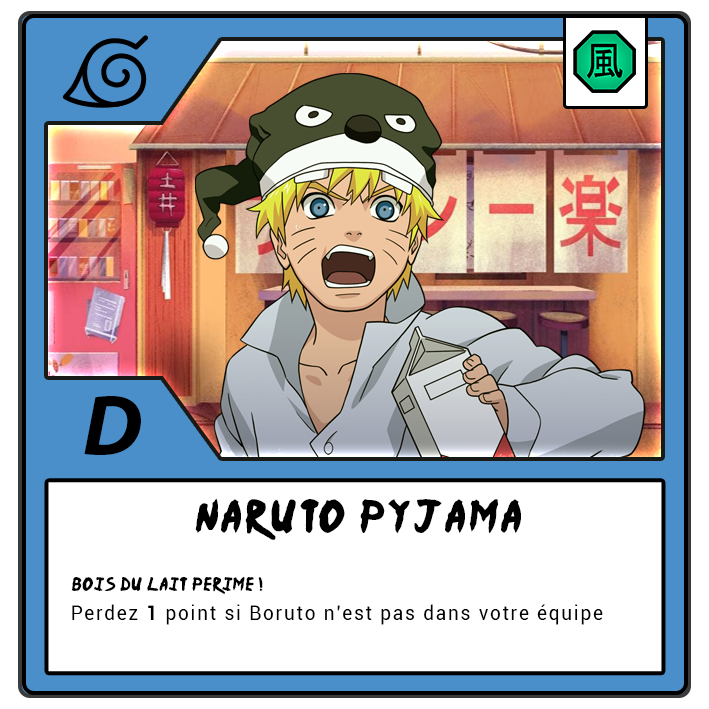
<style>
.page{position:relative;width:709px;height:709px;background:#ffffff}
.page>*{position:absolute;margin:0}
.t1{font:87.5px "MyriadPro-BoldIt";letter-spacing:-0.12em;color:#000000}
.t2{font:37.5px "Ninja-Naruto";letter-spacing:0.1em;color:#000000}
.t3{font:15.4px "Ninja-Naruto";letter-spacing:0.07em;color:#000000}
.t4{font:20.8px "Roboto-Regular";letter-spacing:0.1em;color:#000000;scale:0.9 1}
.t5{font:20.8px "Roboto-Bold";letter-spacing:0.1em;color:#000000;scale:0.9 1}
</style>
<div class="page">
<p class="t1" style="left:84px;top:396px;width:57px;height:59px">D</p>
<p class="t2" style="left:195px;top:498px;width:326px;height:42px">NARUTO Pyjama</p>
<p class="t3" style="left:71px;top:577px;width:192px;height:17px">Bois du lait PERIME !</p>
<p class="t4" style="left:72px;top:604px;width:531px;height:21px">Perdez <span class="t5">1</span> point si Boruto n’est pas dans votre équipe</p>
</div>
